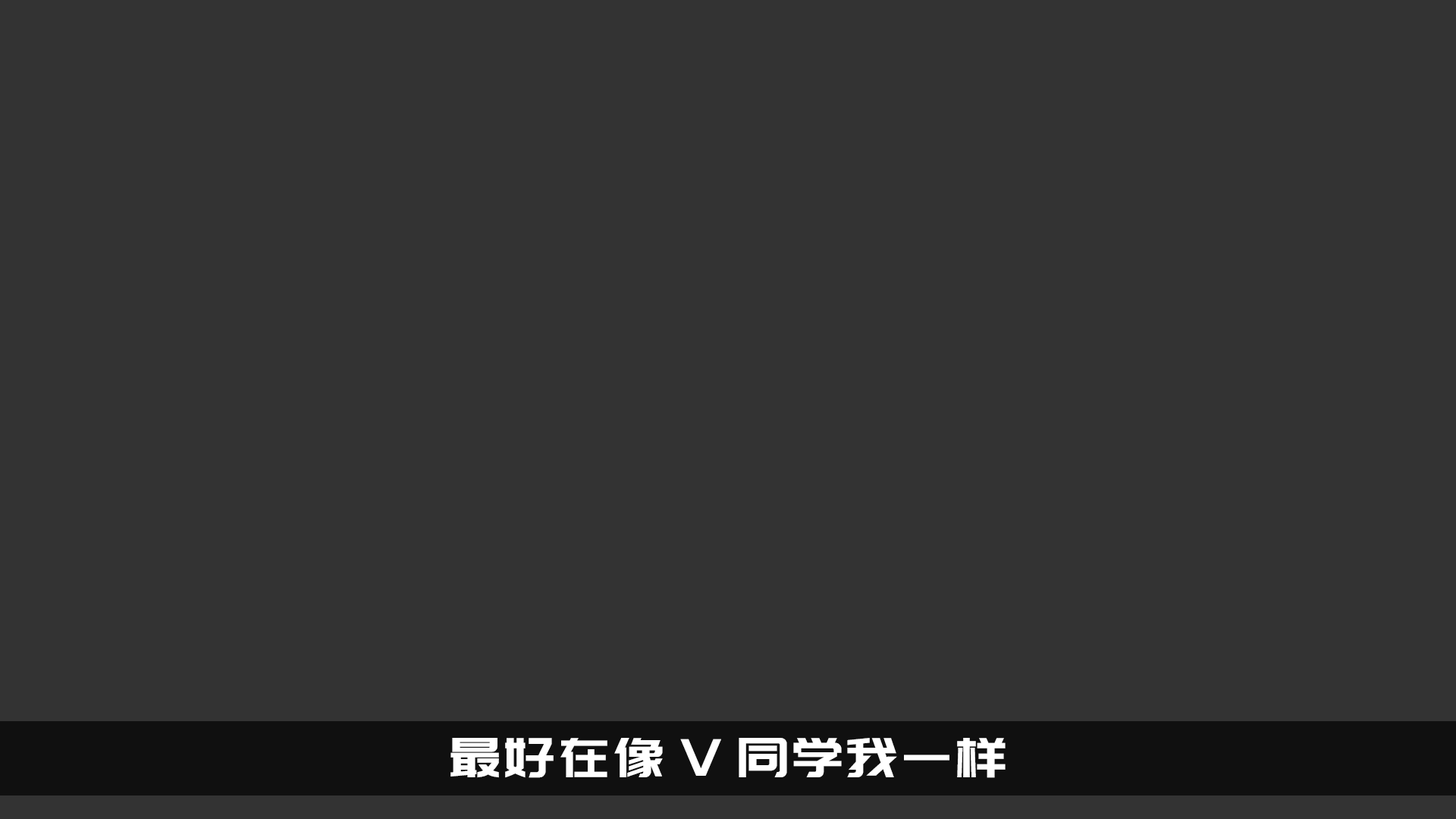
<style>
.page{position:relative;width:1456px;height:819px;background:#333333}
.page>*{position:absolute;margin:0}
.t1{font:54.6px "PangMenZhengDao-3";color:#ffffff}
</style>
<div class="page">
<p class="t1" style="left:450px;top:738px;width:556px;height:40px">最好在像V同学我一样</p>
</div>
